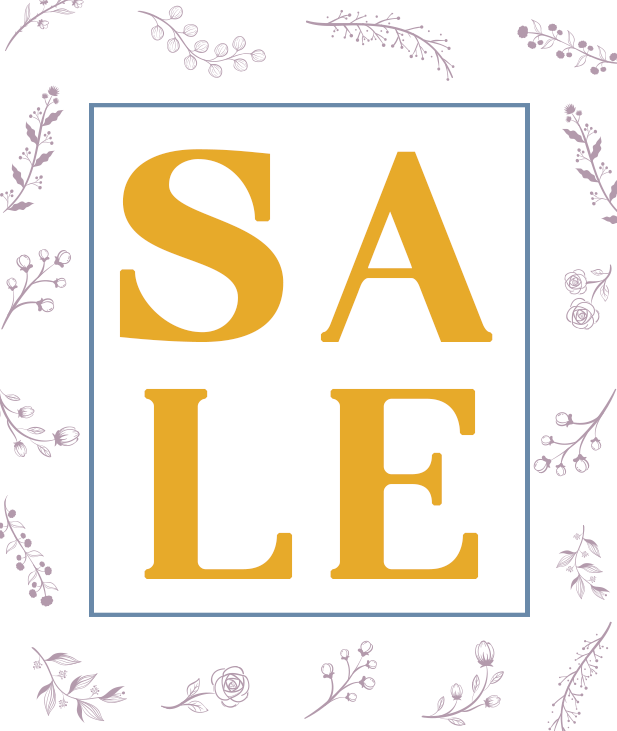
<style>
.page{position:relative;width:617px;height:731px;background:#ffffff}
.page>*{position:absolute;margin:0}
.t1{font:232.6px "Agne-Regular";letter-spacing:0.075em;color:#e7aa2a;font-weight:bold}
</style>
<div class="page">
<p class="t1" style="left:119px;top:149px;width:374px;height:193px">SA</p>
<p class="t1" style="left:144px;top:388px;width:335px;height:191px">LE</p>
</div>
